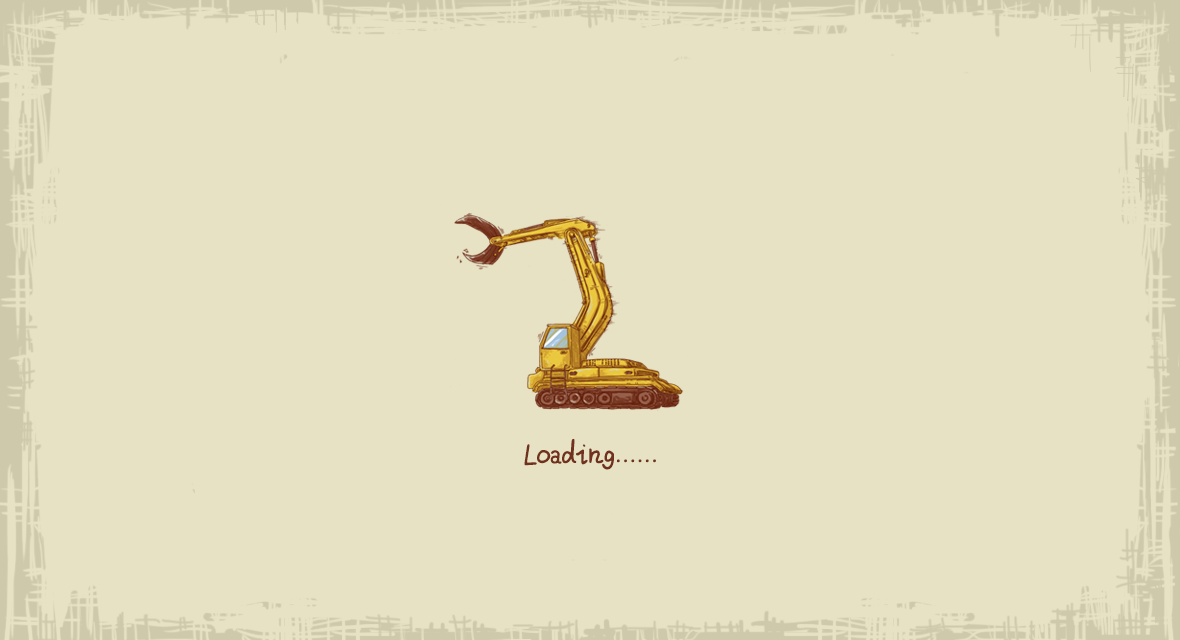
<style>
.page{position:relative;width:1180px;height:640px;background:#e7e2c4}
.page>*{position:absolute;margin:0}
.t1{font:36px "FZMWJW--GB1-0";letter-spacing:-0.036em;color:#72311c}
</style>
<div class="page">
<p class="t1" style="left:524px;top:438px;width:132px;height:32px">Loading......</p>
</div>
